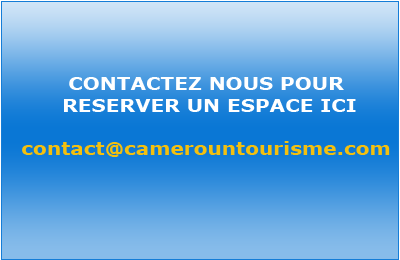
<style>
.page{position:relative;width:400px;height:260px}
.page>*{position:absolute;margin:0}
.t1{font:18px "Verdana-Bold";color:#ffffff;scale:1.11 1}
.t2{font:18px "Verdana-Bold";color:#f3c00f;scale:1.11 1}
</style>
<div class="page">
<p class="t1" style="left:22px;top:77px;width:368px;height:80px;text-align:center">CONTACTEZ NOUS POUR<br> RESERVER UN ESPACE ICI<br><br><span class="t2">contact@camerountourisme.com</span></p>
</div>
